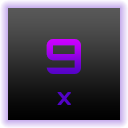
<style>
.page{position:relative;width:128px;height:128px}
.page>*{position:absolute;margin:0}
.t1{font:48px "Orbitron-Bold"}
.t2{font:18px "Orbitron-Black";color:#5303c6}
</style>
<div class="page">
<p class="t1" style="left:46px;top:39px;width:35px;height:35px">9</p>
<p class="t2" style="left:57px;top:92px;width:14px;height:13px">X</p>
</div>
